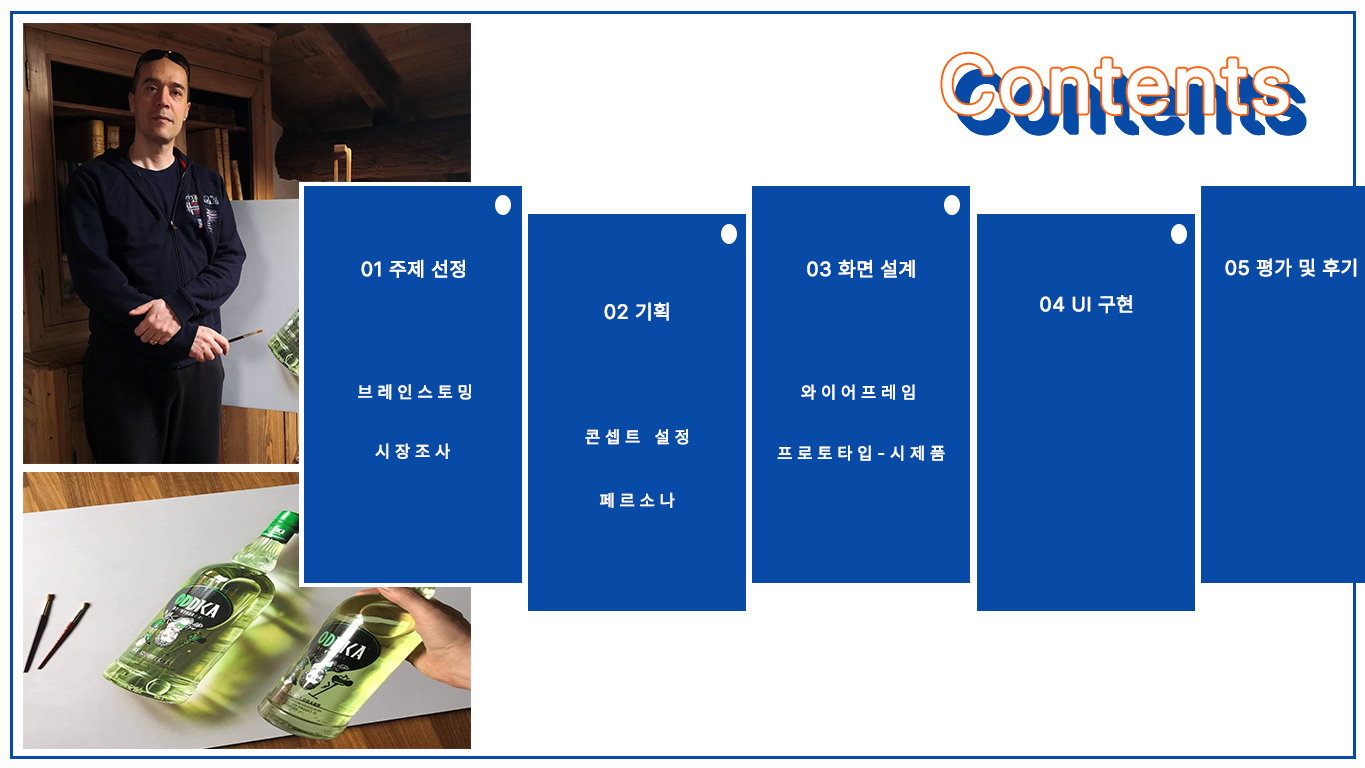
<style>
.page{position:relative;width:1365px;height:768px;background:#084ba7}
.page>*{position:absolute;margin:0}
.t1{font:80px "Pretendard-Regular";letter-spacing:0.03em;color:#ffffff;font-weight:bold}
.t2{font:80px "Pretendard-Regular";letter-spacing:0.03em;font-weight:bold}
.t3{font:20px "Pretendard-Regular";letter-spacing:0.03em;color:#ffffff;font-weight:bold}
.t4{font:17px "Pretendard-Regular";letter-spacing:0.3em;color:#ffffff;font-weight:bold}
</style>
<div class="page">
<p class="t1" style="left:942px;top:53px;width:347px;height:62px">Contents</p>
<p class="t2" style="left:954px;top:68px;width:347px;height:62px">Contents</p>
<p class="t3" style="left:361px;top:259px;width:105px;height:19px">01 주제 선정</p>
<p class="t3" style="left:807px;top:259px;width:108px;height:19px">03 화면 설계</p>
<p class="t3" style="left:1225px;top:258px;width:132px;height:19px">05 평가 및 후기</p>
<p class="t3" style="left:604px;top:302px;width:65px;height:19px">02 기획</p>
<p class="t3" style="left:1040px;top:295px;width:93px;height:19px">04 UI 구현</p>
<p class="t4" style="left:358px;top:384px;width:113px;height:16px">브레인스토밍</p>
<p class="t4" style="left:801px;top:384px;width:114px;height:16px">와이어프레임</p>
<p class="t4" style="left:585px;top:429px;width:104px;height:16px">콘셉트 설정</p>
<p class="t4" style="left:375px;top:443px;width:75px;height:16px">시장조사</p>
<p class="t4" style="left:777px;top:445px;width:168px;height:16px">프로토타입-시제품</p>
<p class="t4" style="left:599px;top:492px;width:76px;height:16px">페르소나</p>
</div>
